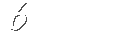
<style>
.page{position:relative;width:128px;height:32px;background:#ffffff}
.page>*{position:absolute;margin:0}
.t1{font:43px "DomDiagonalBT-Regular";letter-spacing:0.075em;color:#ffffff;scale:1.05 1}
</style>
<div class="page">
<p class="t1" style="left:9px;top:2px;width:18px;height:29px">6</p>
</div>
